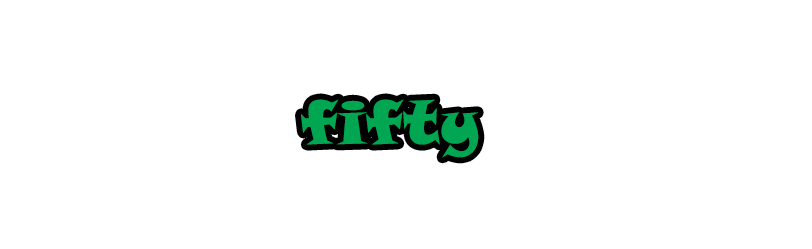
<style>
.page{position:relative;width:812px;height:249px;background:#ffffff}
.page>*{position:absolute;margin:0}
.t1{font:60px "SnapITC-Regular";color:#00a651}
</style>
<div class="page">
<p class="t1" style="left:301px;top:99px;width:178px;height:59px">fifty</p>
</div>
